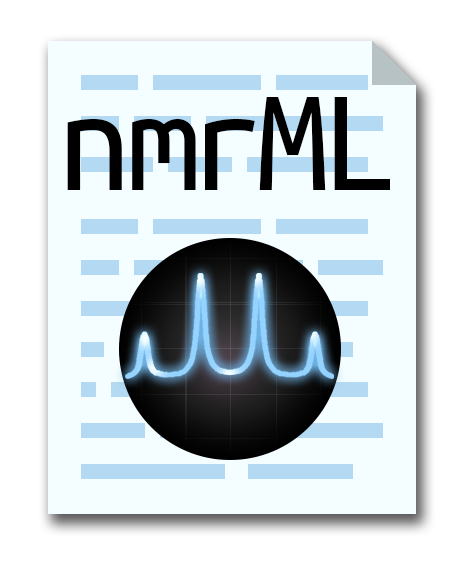
<style>
.page{position:relative;width:461px;height:561px;background:#f4fdff}
.page>*{position:absolute;margin:0}
.t1{font:150px "UbuntuMono-Regular";color:#000000}
</style>
<div class="page">
<p class="t1" style="left:67px;top:97px;width:323px;height:93px">nmrML</p>
</div>
